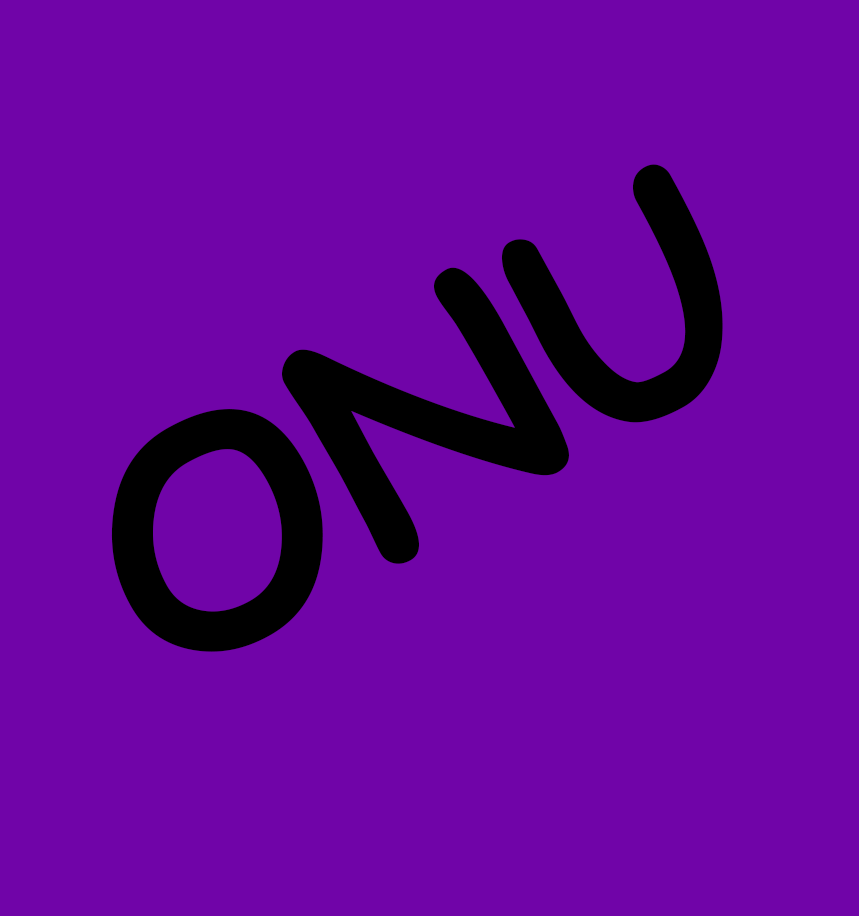
<style>
.page{position:relative;width:859px;height:916px;background:#7004a8}
.page>*{position:absolute;margin:0}
.t1{font:300px "ComicSansMS-Bold";color:#000000;font-variant:small-caps}
</style>
<div class="page">
<p class="t1" style="left:111px;top:164px;width:612px;height:488px;rotate:-29deg">ONU</p>
</div>
